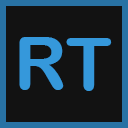
<style>
.page{position:relative;width:128px;height:128px;background:#121212}
.page>*{position:absolute;margin:0}
.t1{font:17.5px "ArialRoundedMTBold";color:#3598db}
</style>
<div class="page">
<p class="t1" style="left:19px;top:37px;width:45px;height:53px">R</p>
<p class="t1" style="left:66px;top:38px;width:46px;height:53px">T</p>
</div>
